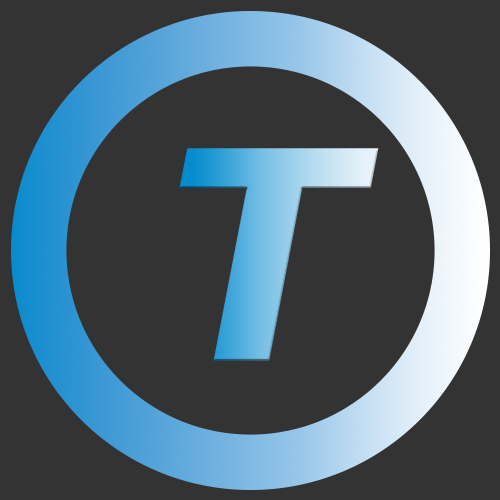
<style>
.page{position:relative;width:500px;height:500px;background:#333333}
.page>*{position:absolute;margin:0}
.t1{font:298.7px "Roboto-BlackItalic";scale:1.11 1}
</style>
<div class="page">
<p class="t1" style="left:179px;top:148px;width:200px;height:213px">T</p>
</div>
